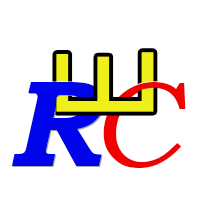
<style>
.page{position:relative;width:200px;height:200px;background:#ffffff}
.page>*{position:absolute;margin:0}
.t1{font:135.2px "ArialNarrow";color:#eff01a}
.t2{font:123px "BookmanOldStyle-BoldItalic";color:#0004eb}
.t3{font:123px "BookmanOldStyle-Italic";color:#ef0300}
</style>
<div class="page">
<p class="t1" style="left:56px;top:52px;width:98px;height:60px;rotate:-90deg">E</p>
<p class="t2" style="left:11px;top:82px;width:92px;height:84px">R</p>
<p class="t3" style="left:103px;top:82px;width:83px;height:86px">C</p>
</div>
